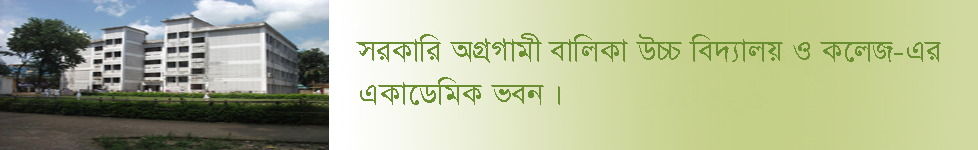
<style>
.page{position:relative;width:978px;height:150px}
.page>*{position:absolute;margin:0}
.t1{font:36px "SutonnyMJ";color:#698f30}
</style>
<div class="page">
<p class="t1" style="left:356px;top:33px;width:585px;height:72px">miKvwi AMÖMvgx evwjKv D”P we`¨vjq I K‡jR-Gi <br>GKv‡WwgK feb|</p>
</div>
